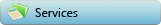
<style>
.page{position:relative;width:161px;height:25px}
.page>*{position:absolute;margin:0}
.t1{font:12px "SegoeUI";color:#060606}
</style>
<div class="page">
<p class="t1" style="left:35px;top:8px;width:43px;height:9px">Services</p>
</div>
